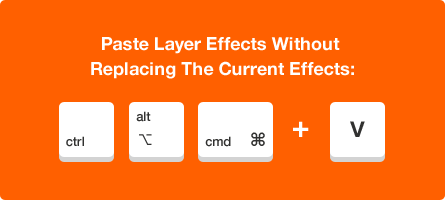
<style>
.page{position:relative;width:445px;height:200px;background:#ff6000}
.page>*{position:absolute;margin:0}
.t1{font:18px/25px "HelveticaNeue-Bold";color:#ffffff}
.t2{font:13px "HelveticaNeue-Medium";color:#313130}
.t3{font:30px "HelveticaNeue-Bold";color:#ffffff}
.t4{font:30px "HelveticaNeue-Medium";color:#313130}
.t5{font:15px "LucidaGrande-Bold";color:#313130}
.t6{font:18px "LucidaGrande-Bold";color:#313130}
</style>
<div class="page">
<p class="t1" style="left:91px;top:37px;width:263px;height:42px;text-align:center">Paste Layer Effects Without <br>Replacing The Current Effects:</p>
<p class="t2" style="left:136px;top:111px;width:15px;height:11px">alt</p>
<p class="t3" style="left:293px;top:121px;width:16px;height:16px">+</p>
<p class="t4" style="left:350px;top:121px;width:15px;height:16px">v</p>
<p class="t2" style="left:66px;top:136px;width:18px;height:11px">ctrl</p>
<p class="t5" style="left:139px;top:134px;width:13px;height:11px">⌥</p>
<p class="t2" style="left:205px;top:136px;width:26px;height:11px">cmd</p>
<p class="t6" style="left:251px;top:132px;width:14px;height:14px">⌘</p>
</div>
